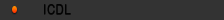
<style>
.page{position:relative;width:224px;height:20px;background:#333333}
.page>*{position:absolute;margin:0}
.t1{font:14.9px "ArialRoundedMTBold";color:#030303;scale:0.78 1}
</style>
<div class="page">
<p class="t1" style="left:44px;top:4px;width:27px;height:11px">ICDL</p>
</div>
